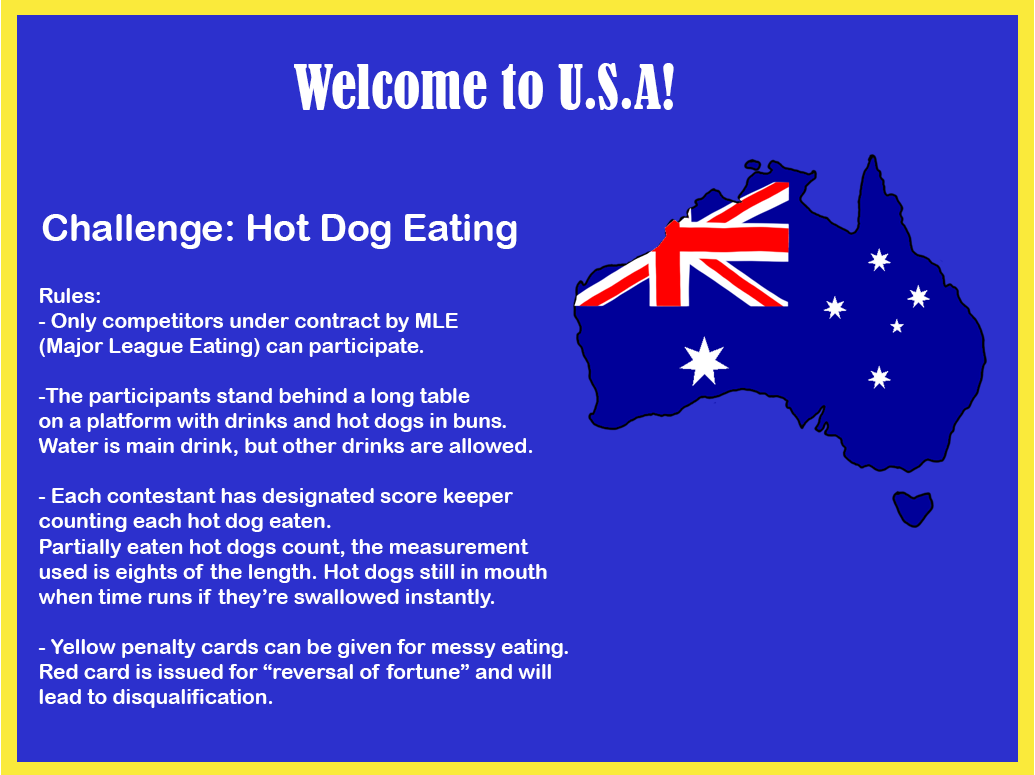
<style>
.page{position:relative;width:1035px;height:775px;background:#2c30cd}
.page>*{position:absolute;margin:0}
.t1{font:56.9px "BernardMT-Condensed";color:#ffffff}
.t2{font:37.5px "ArialRoundedMTBold";color:#ffffff}
.t3{font:20.9px "ArialRoundedMTBold";color:#ffffff}
</style>
<div class="page">
<p class="t1" style="left:294px;top:63px;width:380px;height:47px">Welcome to U.S.A!</p>
<p class="t2" style="left:42px;top:214px;width:475px;height:35px">Challenge: Hot Dog Eating</p>
<p class="t3" style="left:38px;top:288px;width:530px;height:420px">Rules:<br>- Only competitors under contract by MLE <br>(Major League Eating) can participate.<br><br>-The participants stand behind a long table <br>on a platform with drinks and hot dogs in buns. <br>Water is main drink, but other drinks are allowed.<br><br>- Each contestant has designated score keeper <br>counting each hot dog eaten. <br>Partially eaten hot dogs count, the measurement <br>used is eights of the length. Hot dogs still in mouth <br>when time runs if they’re swallowed instantly.<br><br>- Yellow penalty cards can be given for messy eating. <br>Red card is issued for “reversal of fortune” and will <br>lead to disqualification.</p>
</div>
